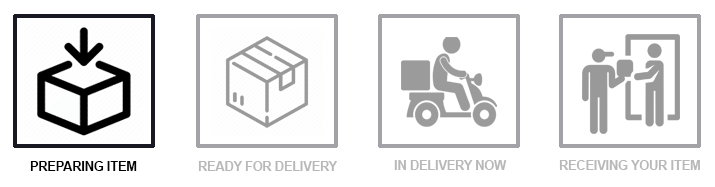
<style>
.page{position:relative;width:715px;height:187px;background:#ffffff}
.page>*{position:absolute;margin:0}
.t1{font:12.5px "Arial-BoldMT";color:#020202}
.t2{font:12.5px "Arial-BoldMT";color:#b8b8b8}
</style>
<div class="page">
<p class="t1" style="left:30px;top:161px;width:107px;height:10px">PREPARING ITEM</p>
<p class="t2" style="left:198px;top:161px;width:139px;height:10px">READY FOR DELIVERY</p>
<p class="t2" style="left:394px;top:160px;width:113px;height:10px">IN DELIVERY NOW</p>
<p class="t2" style="left:559px;top:160px;width:141px;height:10px">RECEIVING YOUR ITEM</p>
</div>
